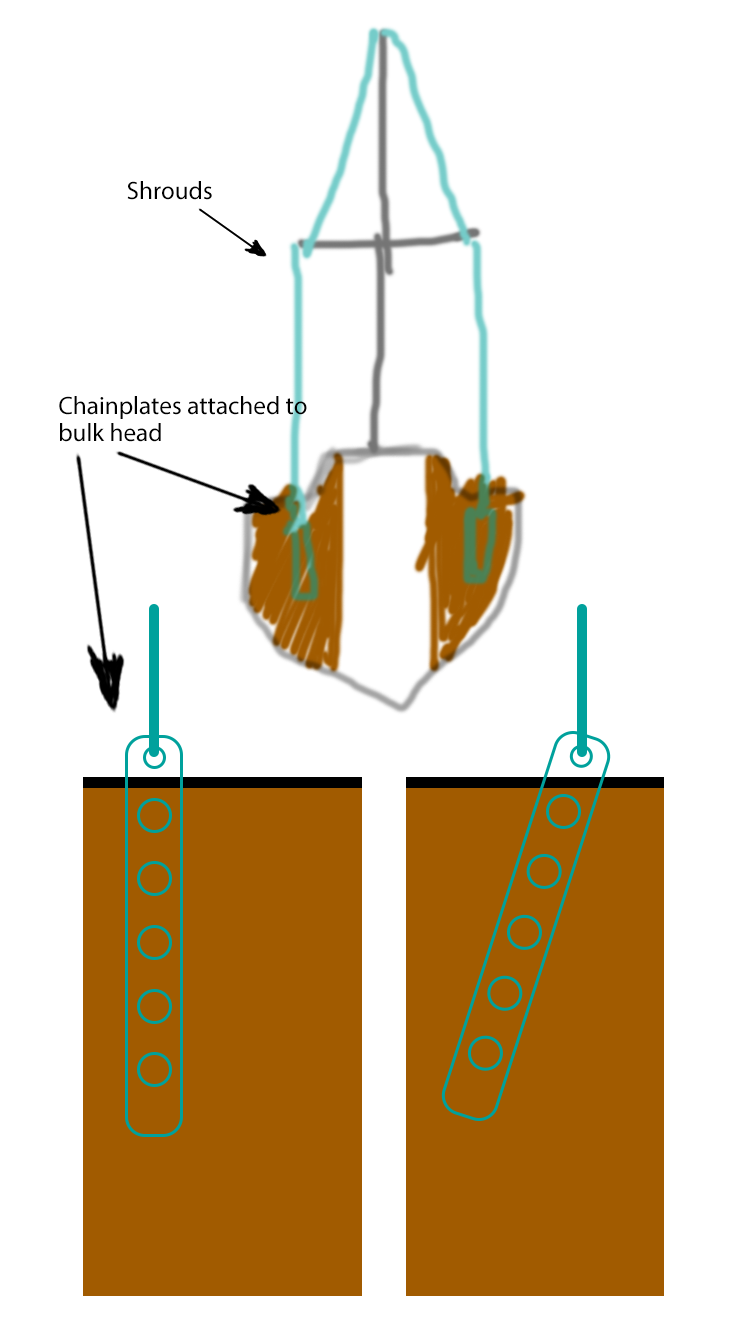
<style>
.page{position:relative;width:750px;height:1334px;background:#ffffff}
.page>*{position:absolute;margin:0}
.t1{font:25.2px "MyriadPro-Regular";color:#000000}
.t2{font:25.2px/27px "MyriadPro-Regular";color:#000000}
</style>
<div class="page">
<p class="t1" style="left:127px;top:181px;width:85px;height:19px">Shrouds</p>
<p class="t2" style="left:59px;top:396px;width:248px;height:46px">Chainplates attached to<br>bulk head</p>
</div>
